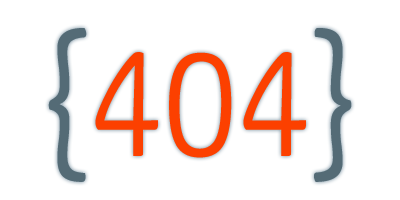
<style>
.page{position:relative;width:400px;height:200px;background:#ffffff}
.page>*{position:absolute;margin:0}
.t1{font:172px "YanoneKaffeesatz-Light";color:#fc4000}
.t2{font:172px "YanoneKaffeesatz-Light";color:#546b76}
</style>
<div class="page">
<p class="t1" style="left:48px;top:28px;width:304px;height:154px"><span class="t2">{</span>404<span class="t2">}</span></p>
</div>
